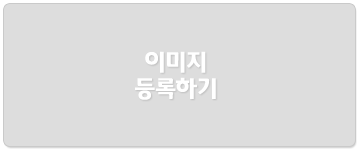
<style>
.page{position:relative;width:360px;height:150px;background:#dddddd}
.page>*{position:absolute;margin:0}
.t1{font:22px "Daum_SemiBold";letter-spacing:-0.025em;color:#ffffff;scale:0.97 1}
</style>
<div class="page">
<p class="t1" style="left:135px;top:51px;width:81px;height:49px;text-align:center">이미지<br>등록하기</p>
</div>
